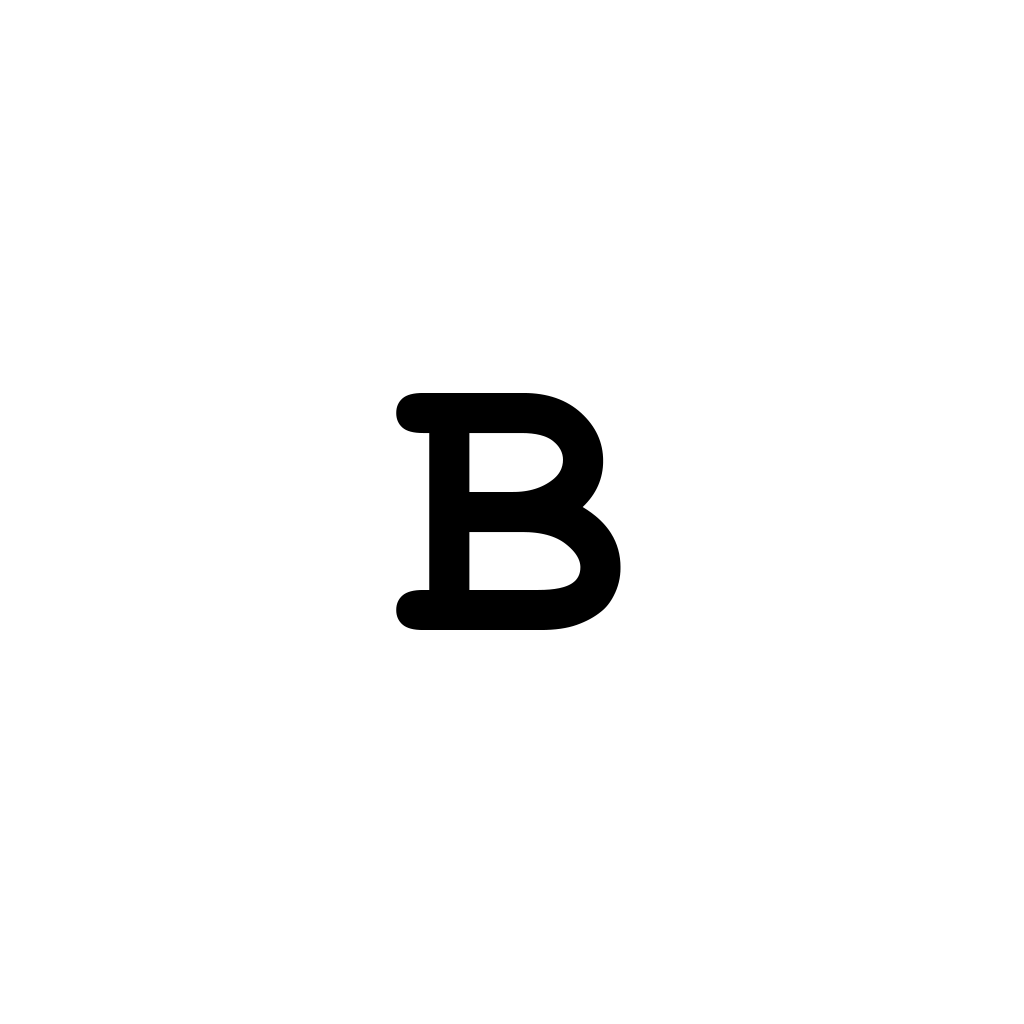
<style>
.page{position:relative;width:1024px;height:1024px;background:#ffffff}
.page>*{position:absolute;margin:0}
.t1{font:400px "CourierNewPS-BoldMT";color:#000000}
</style>
<div class="page">
<p class="t1" style="left:396px;top:393px;width:225px;height:237px">B</p>
</div>
